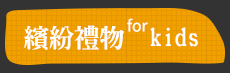
<style>
.page{position:relative;width:230px;height:73px;background:#f29f00}
.page>*{position:absolute;margin:0}
.t1{font:25.1px "ARMingB5-Heavy";color:#fefefe}
.t2{font:15.7px "SourceHanSans-Regular";color:#fefefe}
</style>
<div class="page">
<p class="t1" style="left:24px;top:25px;width:174px;height:25px">繽紛禮物  kids</p>
<p class="t2" style="left:127px;top:18px;width:21px;height:14px">for</p>
</div>
